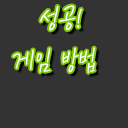
<style>
.page{position:relative;width:128px;height:128px;background:#333333}
.page>*{position:absolute;margin:0}
.t1{font:32px "KCC-eunyoung-Regular";color:#ffffff}
</style>
<div class="page">
<p class="t1" style="left:40px;top:5px;width:42px;height:26px">성공!</p>
<p class="t1" style="left:12px;top:47px;width:83px;height:26px">게임 방법</p>
</div>
